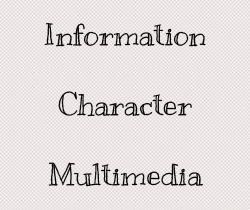
<style>
.page{position:relative;width:250px;height:210px}
.page>*{position:absolute;margin:0}
.t1{font:30px "Kranky-Regular";color:#000000}
</style>
<div class="page">
<p class="t1" style="left:44px;top:23px;width:162px;height:24px">Information</p>
<p class="t1" style="left:58px;top:91px;width:134px;height:26px">Character</p>
<p class="t1" style="left:48px;top:162px;width:155px;height:25px">Multimedia</p>
</div>
